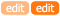
<style>
.page{position:relative;width:60px;height:16px;background:#ffffff}
.page>*{position:absolute;margin:0}
.t1{font:11px "Tahoma";color:#ffffff}
</style>
<div class="page">
<p class="t1" style="left:6px;top:3px;width:19px;height:10px">edit</p>
<p class="t1" style="left:36px;top:3px;width:19px;height:10px">edit</p>
</div>
